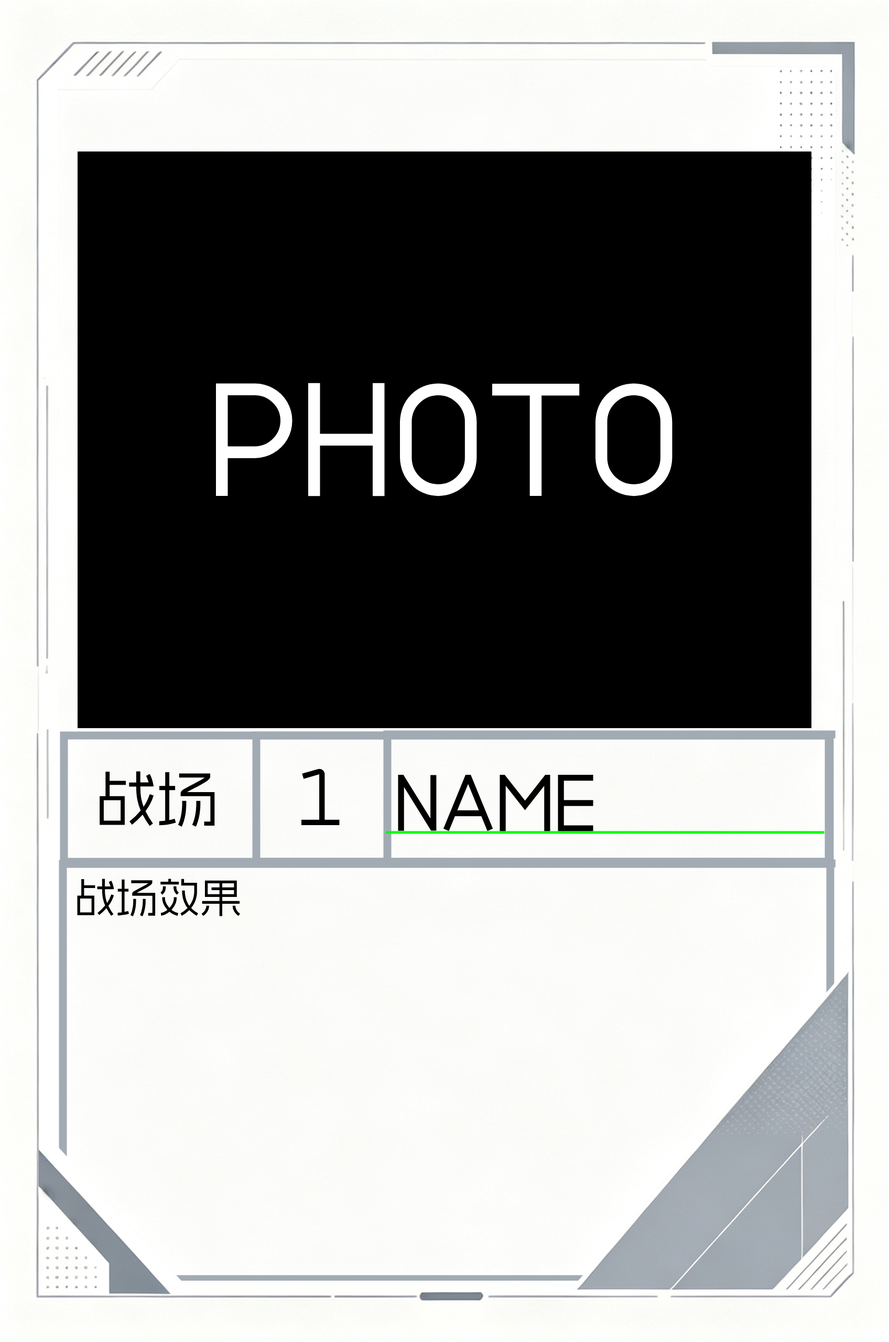
<style>
.page{position:relative;width:889px;height:1342px;background:#000000}
.page>*{position:absolute;margin:0}
.t1{font:61.8px "AidianFengYaHei";color:#000000}
.t2{font:78.6px "AidianFengYaHei";color:#000000}
.t3{font:41.9px "AidianFengYaHei";color:#000000}
</style>
<div class="page">
<p class="t1" style="left:100px;top:771px;width:115px;height:55px">战场</p>
<p class="t2" style="left:301px;top:768px;width:39px;height:57px">1</p>
<p class="t2" style="left:398px;top:774px;width:195px;height:57px">NAME</p>
<p class="t3" style="left:77px;top:878px;width:163px;height:39px">战场效果</p>
</div>
